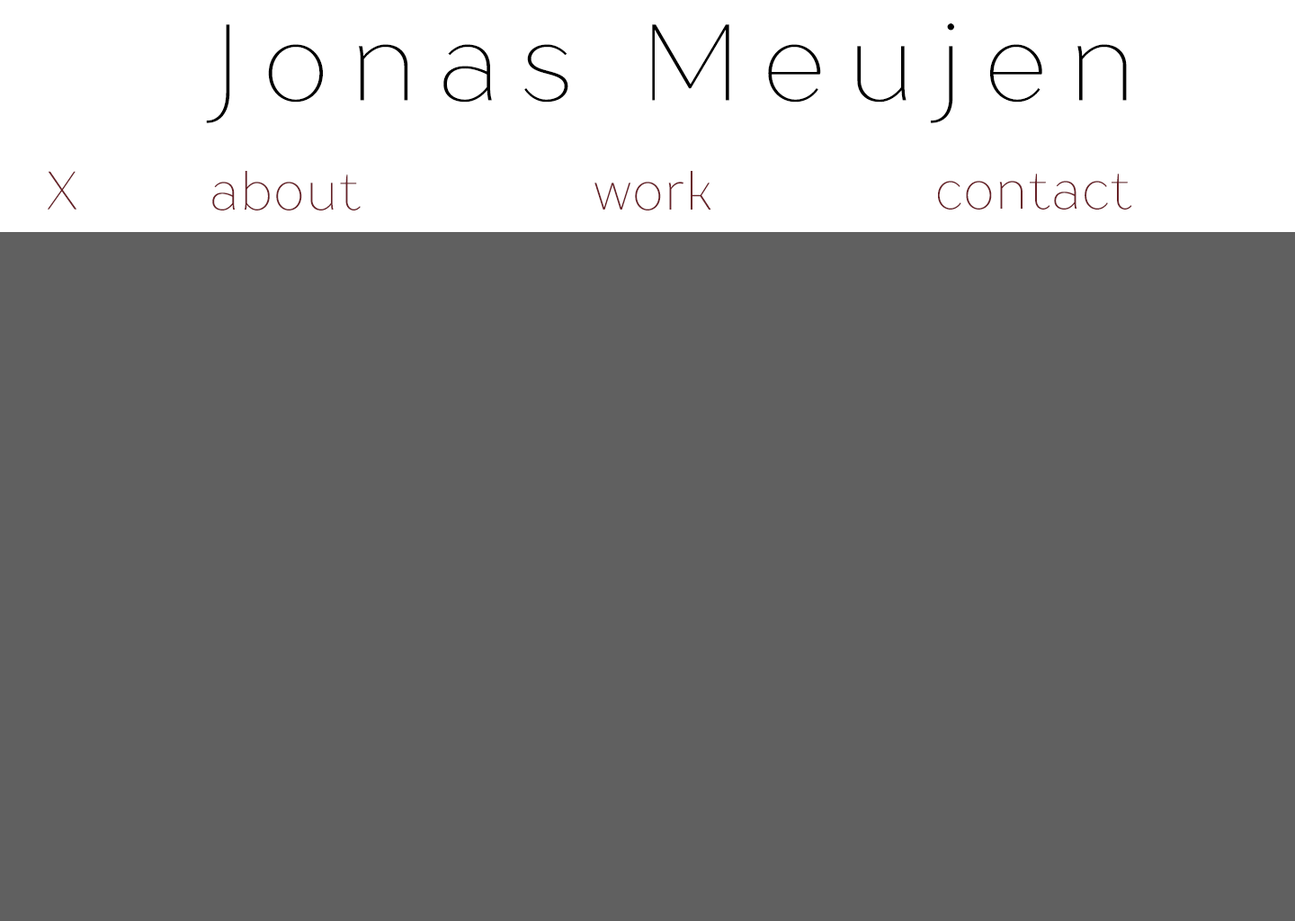
<style>
.page{position:relative;width:1295px;height:921px;background:#606060}
.page>*{position:absolute;margin:0}
.t1{font:107.9px "Drugs";letter-spacing:0.2em;color:#000000}
.t2{font:53.4px "Drugs";letter-spacing:0.2em;color:#682127;scale:0.93 1}
.t3{font:53.4px "Drugs";letter-spacing:0.04em;color:#682127;scale:0.93 1}
</style>
<div class="page">
<p class="t1" style="left:206px;top:23px;width:921px;height:100px">Jonas Meujen</p>
<p class="t2" style="left:48px;top:171px;width:28px;height:39px">X</p>
<p class="t3" style="left:212px;top:171px;width:149px;height:39px">about</p>
<p class="t3" style="left:594px;top:171px;width:117px;height:39px">work</p>
<p class="t3" style="left:938px;top:174px;width:194px;height:36px">contact</p>
</div>
